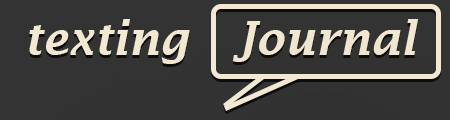
<style>
.page{position:relative;width:450px;height:120px;background:#333333}
.page>*{position:absolute;margin:0}
.t1{font:45.8px "LucidaFax-DemiItalic";color:#f3e9d2}
</style>
<div class="page">
<p class="t1" style="left:29px;top:19px;width:390px;height:45px">texting   Journal</p>
</div>
